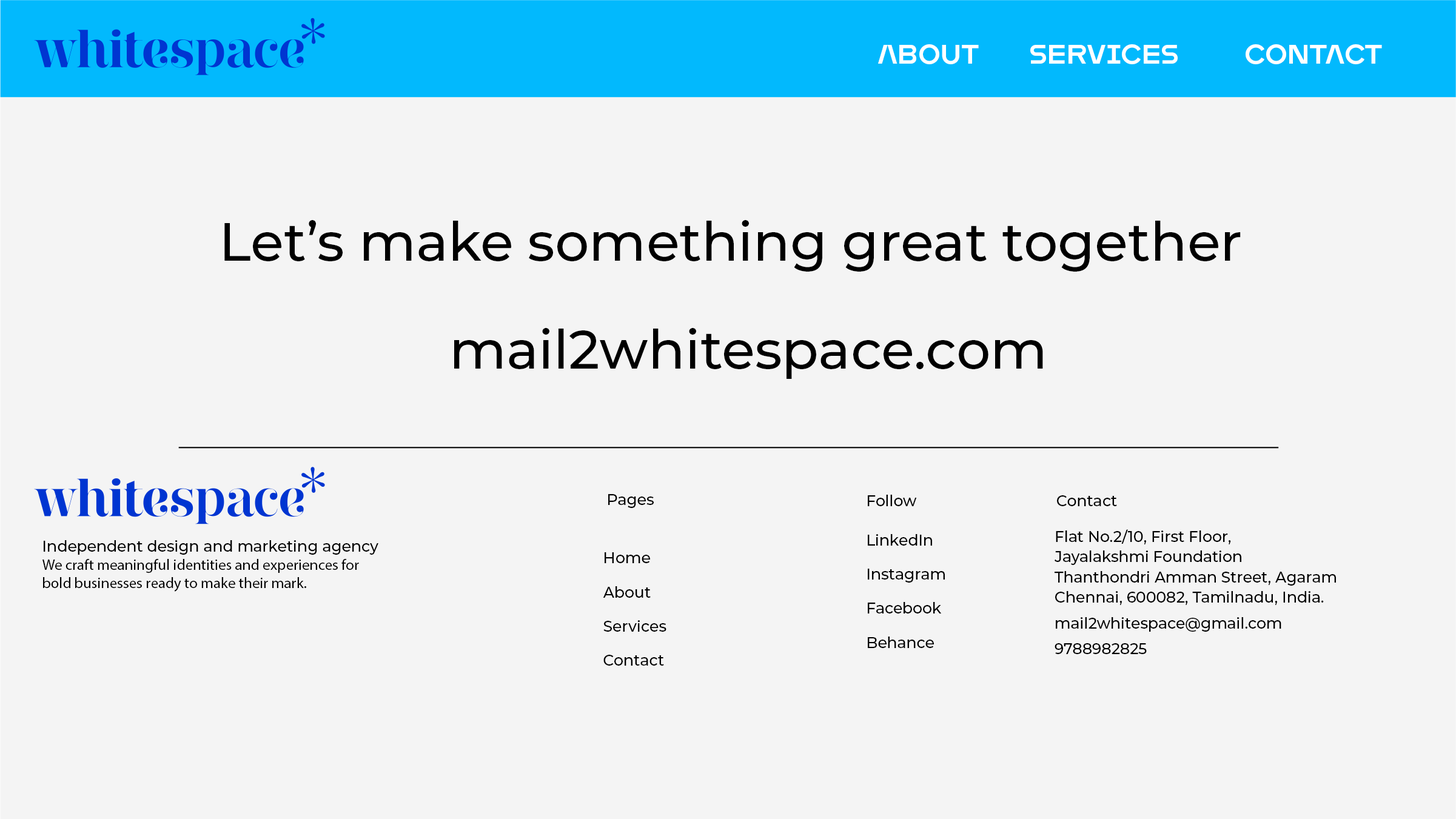
<style>
.page{position:relative;width:1456px;height:819px;background:#f4f4f4}
.page>*{position:absolute;margin:0}
.t1{font:27.2px "MonopolTRIAL-Regular";color:#ffffff}
.t2{font:53.9px "Montserrat-Medium";color:#000000}
.t3{font:15.2px "Montserrat-Medium";color:#000000}
.t4{font:15.2px "MyriadPro-Regular";color:#000000}
.t5{font:15.2px/34.1px "Montserrat-Medium";color:#000000}
</style>
<div class="page">
<p class="t1" style="left:878px;top:44px;width:101px;height:20px">About</p>
<p class="t1" style="left:1030px;top:44px;width:147px;height:20px">Services</p>
<p class="t1" style="left:1245px;top:44px;width:137px;height:20px">Contact</p>
<p class="t2" style="left:224px;top:220px;width:1017px;height:52px">Let’s make something great together</p>
<p class="t2" style="left:454px;top:328px;width:589px;height:51px">mail2whitespace.com</p>
<p class="t3" style="left:608px;top:494px;width:46px;height:14px">Pages</p>
<p class="t3" style="left:868px;top:495px;width:49px;height:11px">Follow</p>
<p class="t3" style="left:1057px;top:495px;width:60px;height:11px">Contact</p>
<p class="t3" style="left:1056px;top:529px;width:175px;height:15px">Flat No.2/10, First Floor,</p>
<p class="t4" style="left:42px;top:540px;width:336px;height:52px"><span class="t5">Independent design and marketing agency <br></span>We craft meaningful identities and experiences for <br>bold businesses ready to make their mark.</p>
<p class="t5" style="left:868px;top:534px;width:77px;height:114px">LinkedIn<br>Instagram<br>Facebook<br>Behance</p>
<p class="t5" style="left:603px;top:552px;width:63px;height:114px">Home<br>About<br>Services <br>Contact</p>
<p class="t3" style="left:1054px;top:551px;width:187px;height:14px">Jayalakshmi Foundation</p>
<p class="t3" style="left:1054px;top:571px;width:282px;height:15px">Thanthondri Amman Street, Agaram</p>
<p class="t3" style="left:1055px;top:591px;width:269px;height:14px">Chennai, 600082, Tamilnadu, India.</p>
<p class="t3" style="left:1056px;top:617px;width:225px;height:15px">mail2whitespace@gmail.com</p>
<p class="t3" style="left:1054px;top:643px;width:93px;height:11px">9788982825</p>
</div>
